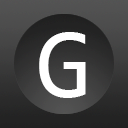
<style>
.page{position:relative;width:128px;height:128px}
.page>*{position:absolute;margin:0}
.t1{font:100px "Consolas";color:#ffffff}
</style>
<div class="page">
<p class="t1" style="left:39px;top:32px;width:47px;height:66px">G</p>
</div>
